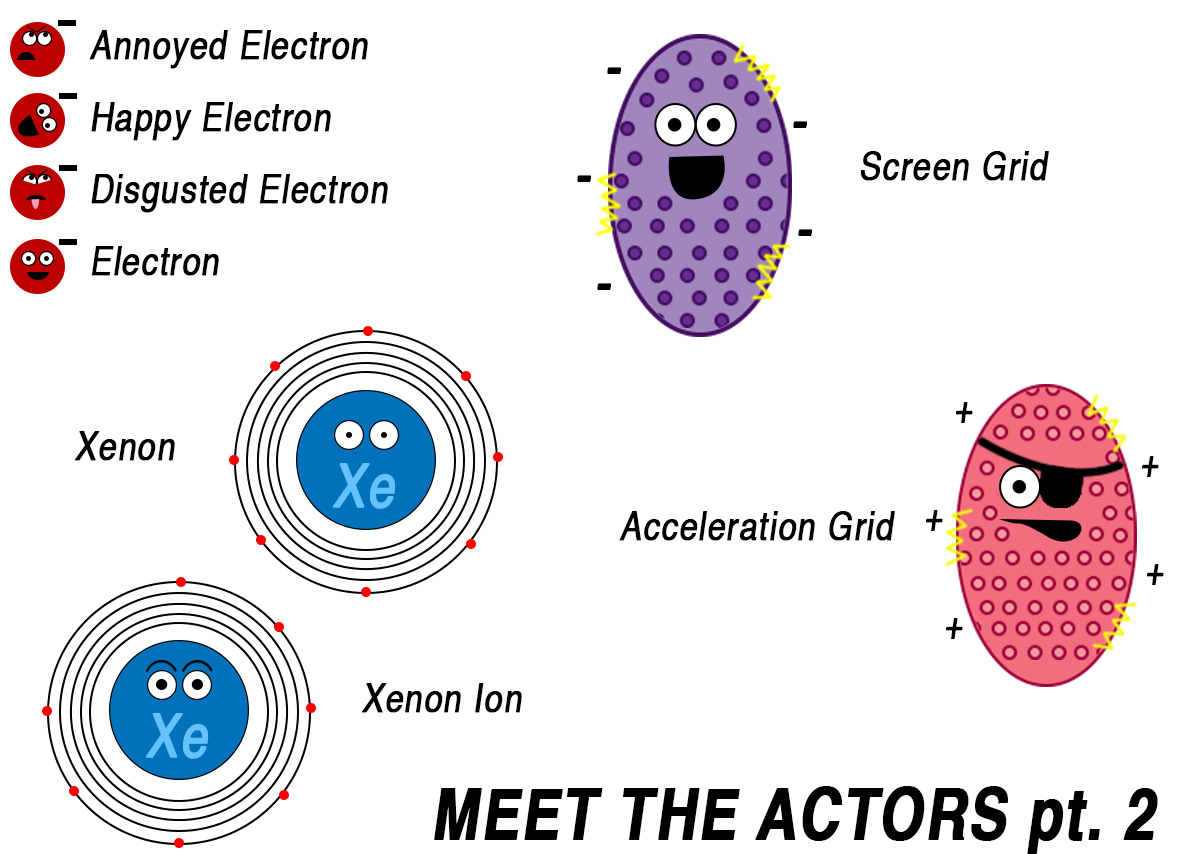
<style>
.page{position:relative;width:1182px;height:854px;background:#ffffff}
.page>*{position:absolute;margin:0}
.t1{font:40px/18px "Helvetica";letter-spacing:0.025em;color:#000000;font-weight:bold;font-style:italic;scale:0.8 1}
.t2{font:60px "Helvetica";letter-spacing:0.025em;color:#64c2ff;font-weight:bold;font-style:italic;scale:0.8 1}
.t3{font:70px "Helvetica-Bold";letter-spacing:0.025em;color:#000000;font-weight:bold;font-style:italic;scale:0.8 1}
</style>
<div class="page">
<p class="t1" style="left:89px;top:30px;width:299px;height:246px">Annoyed Electron<br><br><br><br>Happy Electron<br><br><br><br>Disgusted Electron<br><br><br><br>Electron</p>
<p class="t1" style="left:619px;top:151px;width:430px;height:390px;text-align:center">Screen Grid<br><br><br><br><br><br><br><br><br><br><br><br><br><br><br><br><br><br><br><br>Acceleration Grid</p>
<p class="t1" style="left:74px;top:431px;width:448px;height:282px">Xenon<br><br><br><br><br><br><br><br><br><br><br><br><br><br>                           Xenon Ion</p>
<p class="t2" style="left:333px;top:463px;width:63px;height:46px">Xe</p>
<p class="t2" style="left:146px;top:713px;width:63px;height:46px">Xe</p>
<p class="t3" style="left:434px;top:786px;width:724px;height:69px">MEET THE ACTORS pt. 2</p>
</div>
